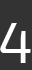
<style>
.page{position:relative;width:32px;height:70px;background:#333333}
.page>*{position:absolute;margin:0}
.t1{font:57px "Exo2-Regular";color:#fefefe}
</style>
<div class="page">
<p class="t1" style="left:0px;top:23px;width:31px;height:40px">4</p>
</div>
